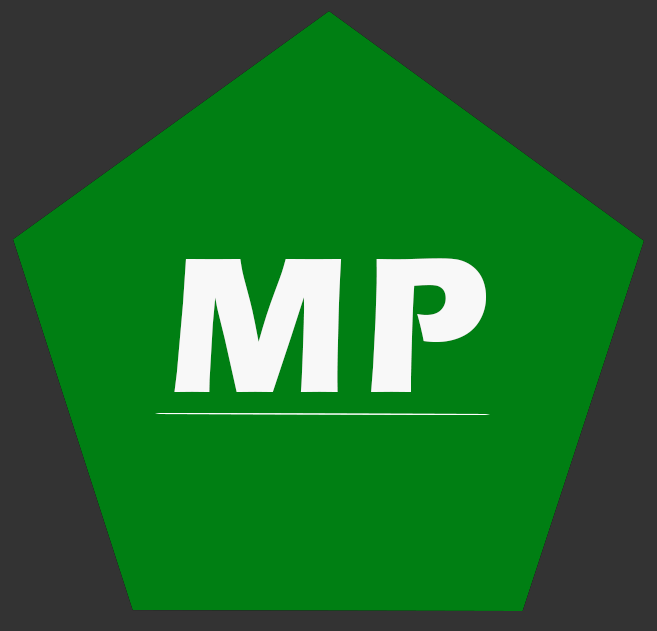
<style>
.page{position:relative;width:657px;height:631px;background:#007f13}
.page>*{position:absolute;margin:0}
.t1{font:200px "ErasITC-Bold";letter-spacing:0.05em;color:#f8f8f8}
</style>
<div class="page">
<p class="t1" style="left:174px;top:258px;width:312px;height:134px">MP</p>
</div>
